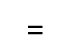
<style>
.page{position:relative;width:70px;height:55px;background:#ffffff}
.page>*{position:absolute;margin:0}
.t1{font:31.8px "DroidSans";color:#000000}
</style>
<div class="page">
<p class="t1" style="left:28px;top:25px;width:15px;height:10px">=</p>
</div>
